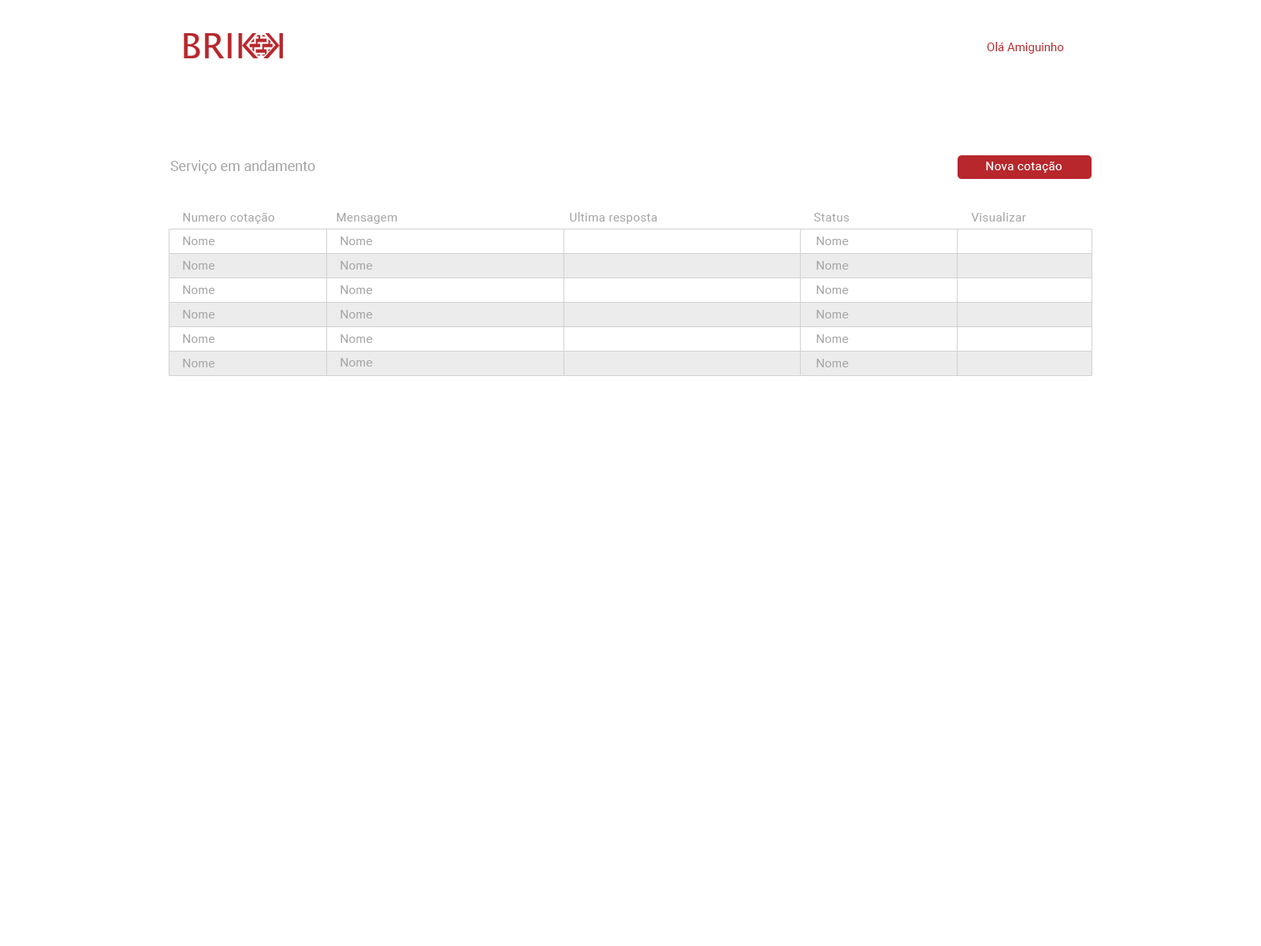
<style>
.page{position:relative;width:1261px;height:946px;background:#ffffff}
.page>*{position:absolute;margin:0}
.t1{font:11.8px "Roboto-Regular";color:#b8272c}
.t2{font:14.2px "Roboto-Regular";color:#a4a4a4}
.t3{font:11.8px "Roboto-Regular";letter-spacing:0.03em;color:#ffffff}
.t4{font:11.8px "Roboto-Regular";letter-spacing:0.03em;color:#a4a4a4}
.t5{font:11.8px "ArialMT";letter-spacing:0.03em;color:#a4a4a4}
</style>
<div class="page">
<p class="t1" style="left:987px;top:42px;width:77px;height:12px">Olá Amiguinho</p>
<p class="t2" style="left:170px;top:160px;width:145px;height:14px">Serviço em andamento</p>
<p class="t3" style="left:986px;top:162px;width:76px;height:11px">Nova cotação</p>
<p class="t4" style="left:183px;top:213px;width:91px;height:11px">Numero cotação</p>
<p class="t4" style="left:337px;top:213px;width:60px;height:11px">Mensagem</p>
<p class="t4" style="left:570px;top:212px;width:87px;height:12px">Ultima resposta</p>
<p class="t4" style="left:814px;top:213px;width:36px;height:8px">Status</p>
<p class="t4" style="left:971px;top:212px;width:55px;height:9px">Visualizar</p>
<p class="t5" style="left:183px;top:236px;width:32px;height:9px">Nome</p>
<p class="t5" style="left:340px;top:236px;width:33px;height:9px">Nome</p>
<p class="t5" style="left:816px;top:236px;width:33px;height:9px">Nome</p>
<p class="t5" style="left:183px;top:261px;width:32px;height:9px">Nome</p>
<p class="t5" style="left:340px;top:261px;width:33px;height:9px">Nome</p>
<p class="t5" style="left:816px;top:261px;width:33px;height:9px">Nome</p>
<p class="t5" style="left:183px;top:285px;width:32px;height:9px">Nome</p>
<p class="t5" style="left:340px;top:285px;width:33px;height:9px">Nome</p>
<p class="t5" style="left:816px;top:285px;width:33px;height:9px">Nome</p>
<p class="t5" style="left:183px;top:310px;width:32px;height:8px">Nome</p>
<p class="t5" style="left:340px;top:310px;width:33px;height:8px">Nome</p>
<p class="t5" style="left:816px;top:310px;width:33px;height:8px">Nome</p>
<p class="t5" style="left:183px;top:334px;width:32px;height:9px">Nome</p>
<p class="t5" style="left:340px;top:334px;width:33px;height:9px">Nome</p>
<p class="t5" style="left:816px;top:334px;width:33px;height:9px">Nome</p>
<p class="t5" style="left:183px;top:359px;width:32px;height:8px">Nome</p>
<p class="t5" style="left:340px;top:359px;width:33px;height:8px">Nome</p>
<p class="t5" style="left:340px;top:358px;width:33px;height:8px">Nome</p>
<p class="t5" style="left:816px;top:359px;width:33px;height:8px">Nome</p>
</div>
